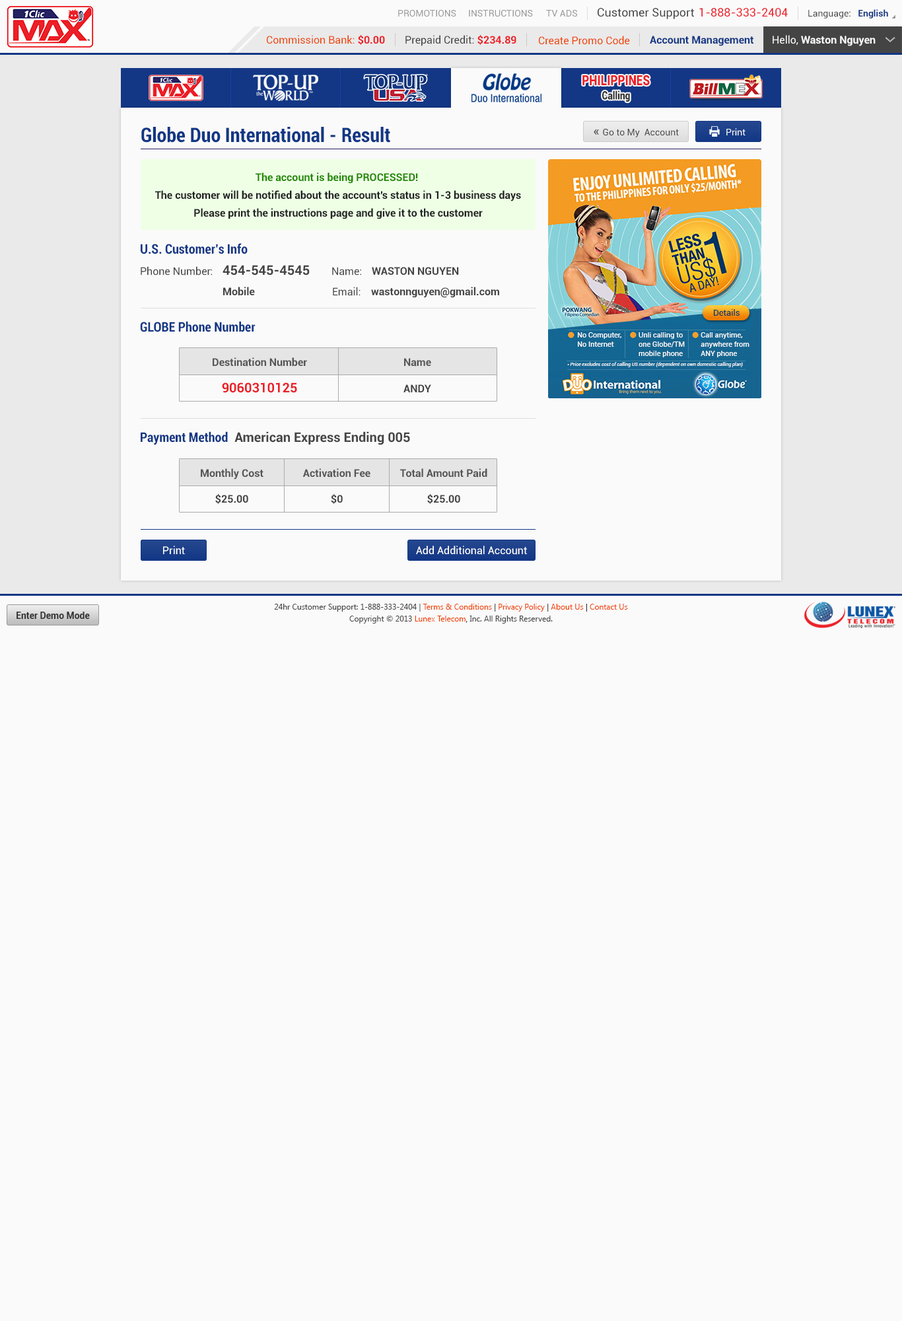
<style>
.page{position:relative;width:902px;height:1321px;background:#fafafa}
.page>*{position:absolute;margin:0}
.t1{font:9.2px "Roboto-Regular";color:#999999}
.t2{font:11.6px "Roboto-Regular";color:#444444}
.t3{font:11.6px "Roboto-Regular";color:#ec2029}
.t4{font:9.2px "Roboto-Regular";color:#444444}
.t5{font:9.2px "Roboto-Bold";color:#123785}
.t6{font:10.6px "Roboto-Regular";color:#ee4400}
.t7{font:10.6px "Roboto-Bold";color:#ec2028}
.t8{font:10.6px "Roboto-Regular";color:#444444}
.t9{font:10.6px "Roboto-Bold";color:#123785}
.t10{font:10.6px "Roboto-Bold";color:#fafafa}
.t11{font:10.6px "Roboto-Regular";color:#fafafa}
.t12{font:14.1px "Roboto-Black";color:#ec2028;scale:0.81 1}
.t13{font:11.3px "Roboto-Black";color:#333333;scale:0.81 1}
.t14{font:19.8px "Roboto-BoldCondensed";color:#123785}
.t15{font:13.2px "Roboto-Regular";color:#444444}
.t16{font:9.2px "Roboto-Regular";color:#fafafa}
.t17{font:10.6px "Roboto-Bold";color:#228800}
.t18{font:10.6px "Roboto-Bold";color:#222222}
.t19{font:13.2px "Roboto-BoldCondensed";color:#123785}
.t20{font:13.2px "Roboto-Bold";color:#444444}
.t21{font:10.6px "Roboto-Bold";color:#444444}
.t22{font:10.6px "Roboto-Bold";color:#555555}
.t23{font:13.2px "Roboto-Bold";color:#ec2028}
.t24{font:10.6px "Roboto-Regular";color:#ffffff}
.t25{font:7.9px/11.9px "SegoeUI";color:#444444}
.t26{font:7.9px/11.9px "SegoeUI";color:#ee4400}
.t27{font:7.9px/11.9px "SegoeUI";color:#333333}
.t28{font:9.2px "Roboto-Bold";color:#333333}
</style>
<div class="page">
<p class="t1" style="left:398px;top:10px;width:59px;height:7px">PROMOTIONS</p>
<p class="t1" style="left:469px;top:10px;width:64px;height:7px">INSTRUCTIONS</p>
<p class="t1" style="left:546px;top:10px;width:31px;height:7px">TV ADS</p>
<p class="t2" style="left:598px;top:8px;width:96px;height:11px">Customer Support</p>
<p class="t3" style="left:700px;top:8px;width:88px;height:9px">1-888-333-2404</p>
<p class="t4" style="left:809px;top:9px;width:80px;height:9px">Language:   <span class="t5">English</span></p>
<p class="t6" style="left:267px;top:35px;width:118px;height:10px">Commission Bank: <span class="t7">$0.00</span></p>
<p class="t8" style="left:406px;top:35px;width:111px;height:11px">Prepaid Credit: <span class="t7">$234.89</span></p>
<p class="t6" style="left:539px;top:36px;width:91px;height:9px">Create Promo Code</p>
<p class="t9" style="left:650px;top:36px;width:104px;height:10px">Account Management</p>
<p class="t10" style="left:773px;top:35px;width:103px;height:11px"><span class="t11">Hello, </span>Waston Nguyen</p>
<p class="t12" style="left:583px;top:75px;width:67px;height:11px">PHILIPPINES</p>
<p class="t13" style="left:603px;top:91px;width:27px;height:11px">Calling</p>
<p class="t14" style="left:141px;top:127px;width:249px;height:16px">Globe Duo International - Result</p>
<p class="t4" style="left:594px;top:129px;width:85px;height:8px"><span class="t15">« </span>Go to My  Account</p>
<p class="t16" style="left:727px;top:128px;width:19px;height:7px">Print</p>
<p class="t17" style="left:256px;top:172px;width:162px;height:12px">The account is being PROCESSED!</p>
<p class="t18" style="left:155px;top:190px;width:366px;height:12px">The customer will be notified about the account's status in 1-3 business days</p>
<p class="t18" style="left:194px;top:208px;width:289px;height:11px">Please print the instructions page and give it to the customer</p>
<p class="t19" style="left:141px;top:243px;width:107px;height:11px">U.S. Customer’s Info</p>
<p class="t8" style="left:141px;top:266px;width:71px;height:9px">Phone Number:</p>
<p class="t20" style="left:223px;top:265px;width:87px;height:10px">454-545-4545</p>
<p class="t8" style="left:332px;top:267px;width:29px;height:8px">Name:</p>
<p class="t21" style="left:372px;top:267px;width:87px;height:8px">WASTON NGUYEN</p>
<p class="t21" style="left:223px;top:287px;width:32px;height:9px">Mobile</p>
<p class="t8" style="left:333px;top:287px;width:28px;height:9px">Email:</p>
<p class="t21" style="left:371px;top:287px;width:128px;height:11px">wastonnguyen@gmail.com</p>
<p class="t19" style="left:140px;top:321px;width:116px;height:11px">GLOBE Phone Number</p>
<p class="t22" style="left:213px;top:357px;width:94px;height:10px">Destination Number</p>
<p class="t22" style="left:404px;top:358px;width:27px;height:9px">Name</p>
<p class="t23" style="left:222px;top:383px;width:75px;height:10px">9060310125</p>
<p class="t21" style="left:404px;top:385px;width:27px;height:7px">ANDY</p>
<p class="t20" style="left:141px;top:431px;width:269px;height:14px"><span class="t19">Payment Method</span>  American Express Ending 005</p>
<p class="t22" style="left:201px;top:468px;width:63px;height:12px">Monthly Cost</p>
<p class="t22" style="left:303px;top:468px;width:68px;height:10px">Activation Fee</p>
<p class="t22" style="left:400px;top:468px;width:88px;height:10px">Total Amount Paid</p>
<p class="t21" style="left:215px;top:494px;width:33px;height:10px">$25.00</p>
<p class="t21" style="left:331px;top:494px;width:12px;height:10px">$0</p>
<p class="t21" style="left:427px;top:494px;width:33px;height:10px">$25.00</p>
<p class="t24" style="left:163px;top:546px;width:22px;height:8px">Print</p>
<p class="t24" style="left:416px;top:546px;width:111px;height:9px">Add Additional Account</p>
<p class="t25" style="left:274px;top:604px;width:354px;height:20px;text-align:center">24hr Customer Support: 1-888-333-2404 | <span class="t26">Terms &amp; Conditions</span><span class="t27"> | </span><span class="t26">Privacy Policy</span><span class="t27"> | </span><span class="t26">About Us</span><span class="t27"> | </span><span class="t26">Contact Us<br></span>Copyright © 2013 <span class="t26">Lunex Telecom</span><span class="t27">,</span> Inc. All Rights Reserved.</p>
<p class="t28" style="left:17px;top:612px;width:73px;height:7px">Enter Demo Mode</p>
</div>
